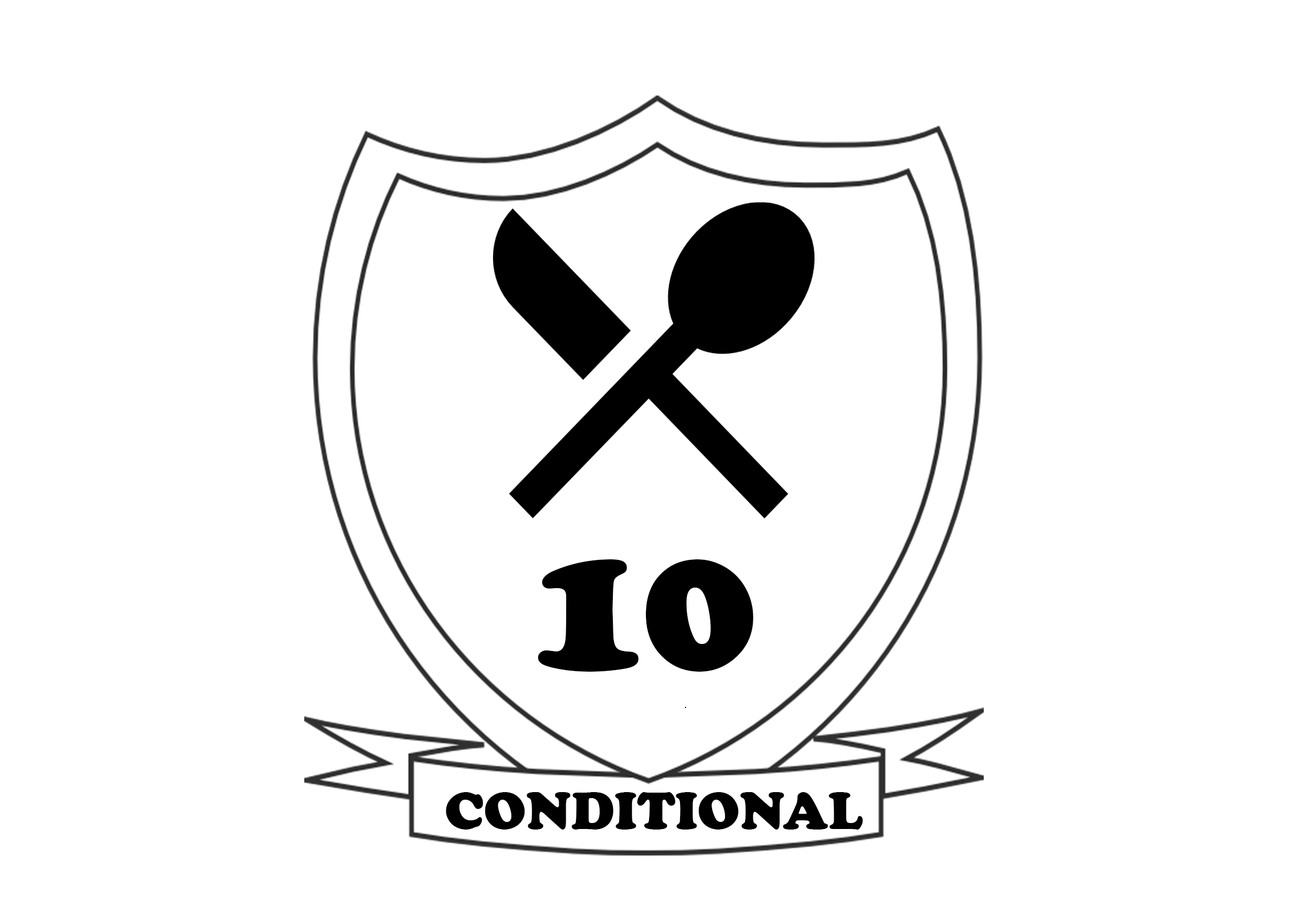
<style>
.page{position:relative;width:1307px;height:912px;background:#ffffff}
.page>*{position:absolute;margin:0}
.t1{font:195.3px "CooperBlack";color:#000000}
.t2{font:54.3px "CooperBlack";color:#000000}
</style>
<div class="page">
<p class="t1" style="left:538px;top:559px;width:216px;height:113px">10</p>
<p class="t2" style="left:446px;top:792px;width:417px;height:38px">CONDITIONAL</p>
</div>
